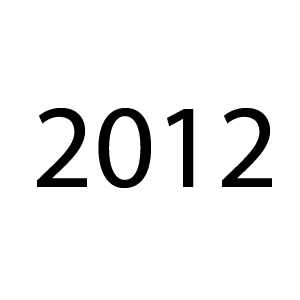
<style>
.page{position:relative;width:300px;height:300px;background:#ffffff}
.page>*{position:absolute;margin:0}
.t1{font:120px "MyriadPro-Regular";color:#000000}
</style>
<div class="page">
<p class="t1" style="left:37px;top:108px;width:235px;height:80px">2012</p>
</div>
